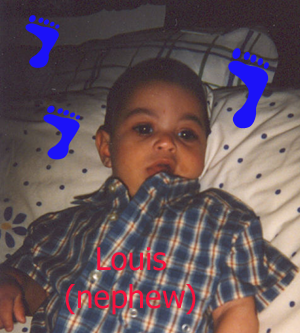
<style>
.page{position:relative;width:300px;height:333px}
.page>*{position:absolute;margin:0}
.t1{font:31.5px "Tahoma";color:#f8123d}
</style>
<div class="page">
<p class="t1" style="left:65px;top:247px;width:131px;height:68px;text-align:center">Louis (nephew)</p>
</div>
